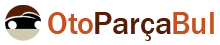
<style>
.page{position:relative;width:220px;height:45px;background:#ffffff}
.page>*{position:absolute;margin:0}
.t1{font:32px "FranklinGothic-Medium";color:#c45222}
.t2{font:32px "FranklinGothic-Medium";color:#531d06}
</style>
<div class="page">
<p class="t1" style="left:48px;top:12px;width:45px;height:22px">Oto</p>
<p class="t2" style="left:95px;top:12px;width:76px;height:29px">Parça</p>
<p class="t1" style="left:173px;top:12px;width:41px;height:22px">Bul</p>
</div>
